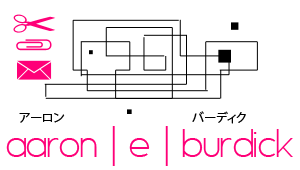
<style>
.page{position:relative;width:300px;height:170px;background:#ffffff}
.page>*{position:absolute;margin:0}
.t1{font:12px "KozGoPr6N-Regular";color:#000000}
.t2{font:48px "Asenine";color:#ff0078}
</style>
<div class="page">
<p class="t1" style="left:19px;top:111px;width:227px;height:13px">アーロン　　　　　　　　 　      バーディク</p>
<p class="t2" style="left:6px;top:126px;width:287px;height:40px">aaron | e | burdick</p>
</div>
